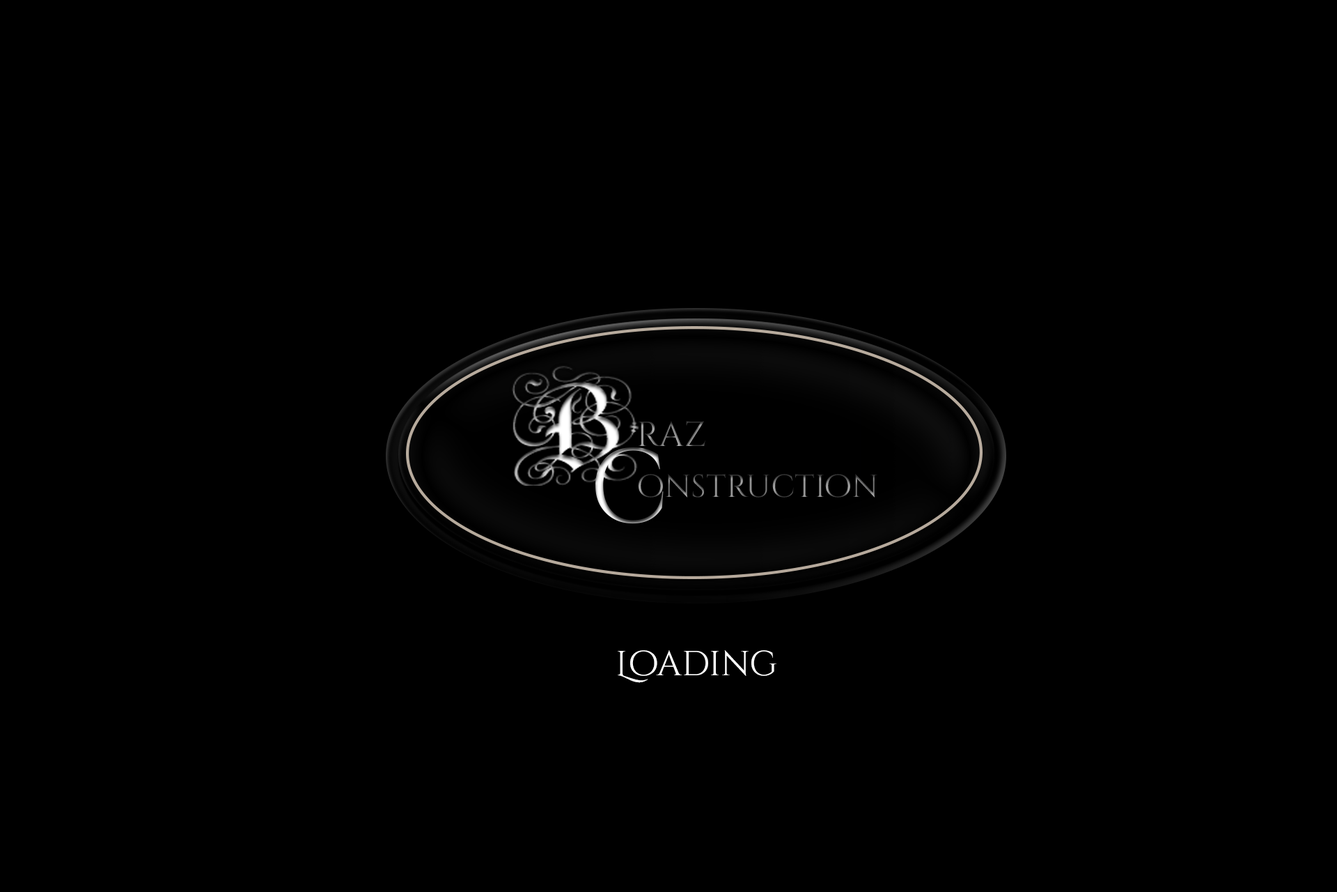
<style>
.page{position:relative;width:1337px;height:892px;background:#000000}
.page>*{position:absolute;margin:0}
.t1{font:34.8px "CinzelDecorative-Regular"}
.t2{font:104.5px "CinzelDecorative-Regular"}
.t3{font:31.9px "CinzelDecorative-Regular"}
.t4{font:34.8px "CinzelDecorative-Regular";color:#ffffff}
</style>
<div class="page">
<p class="t1" style="left:639px;top:421px;width:67px;height:25px">raz</p>
<p class="t2" style="left:596px;top:446px;width:68px;height:78px">c</p>
<p class="t3" style="left:638px;top:474px;width:240px;height:23px">onstruction</p>
<p class="t4" style="left:618px;top:650px;width:159px;height:33px">Loading</p>
</div>
